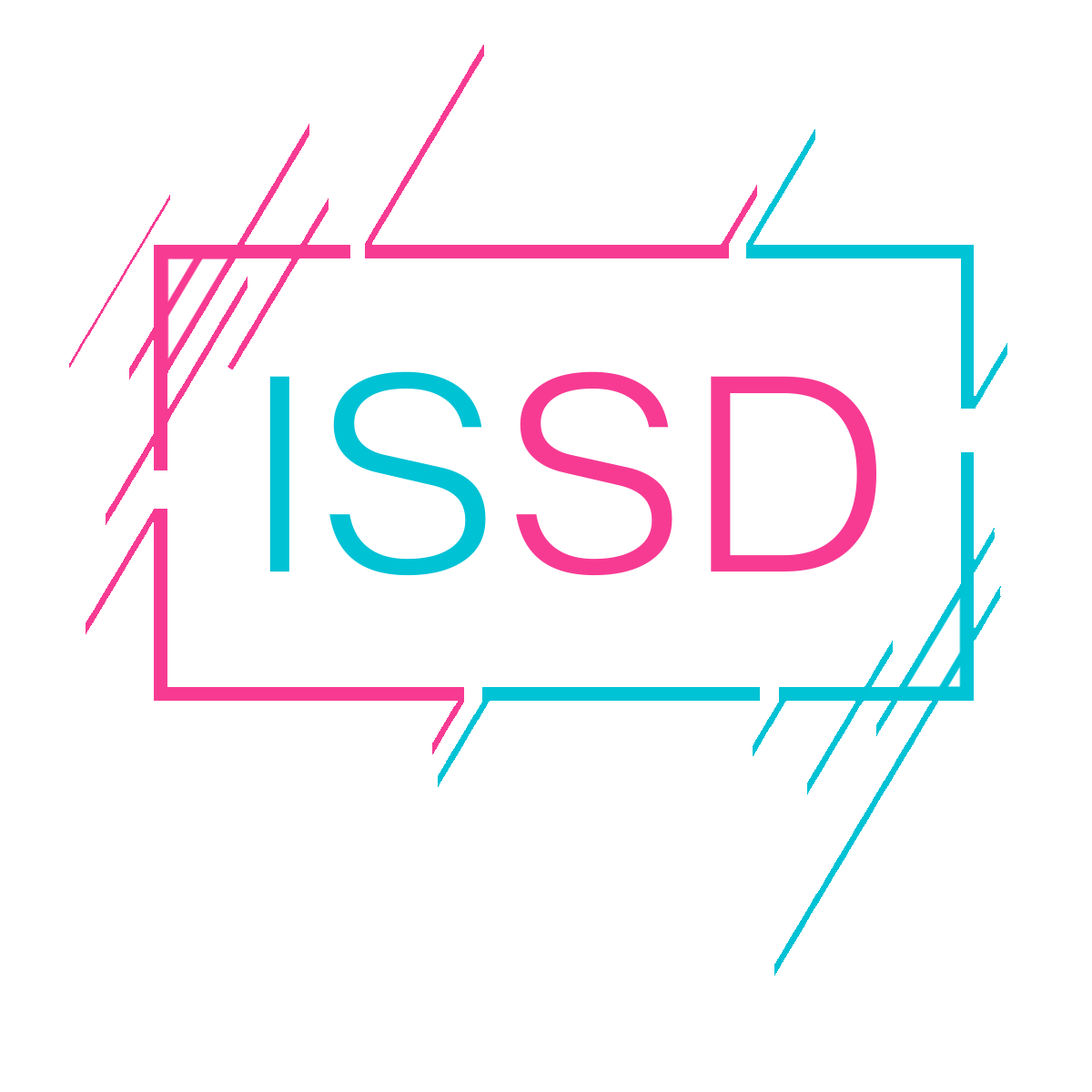
<style>
.page{position:relative;width:1092px;height:1092px;background:#ffffff}
.page>*{position:absolute;margin:0}
.t1{font:318.5px "Berka-Light";color:#00c2d5}
.t2{font:318.5px "Berka-Light";color:#f73b93}
</style>
<div class="page">
<p class="t1" style="left:269px;top:371px;width:607px;height:205px">IS<span class="t2">SD</span></p>
</div>
